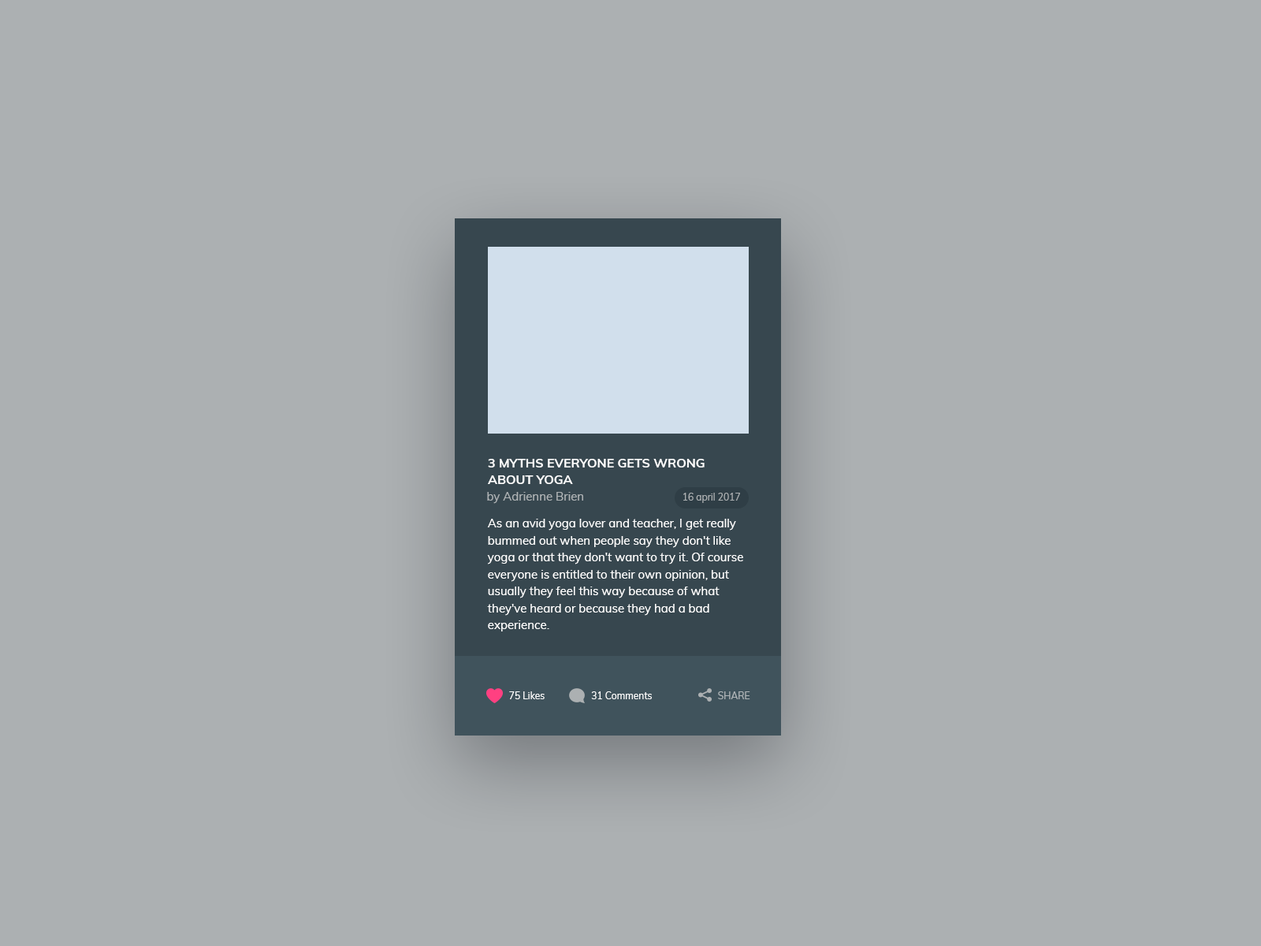
<style>
.page{position:relative;width:1261px;height:946px;background:#acb0b2}
.page>*{position:absolute;margin:0}
.t1{font:12.6px/16.9px "Muli-Bold";color:#ffffff;text-transform:uppercase}
.t2{font:11.8px "Muli-Regular";color:#aeb3b5}
.t3{font:9.5px "Muli-Regular";color:#acb0b2}
.t4{font:11.8px/16.9px "Muli-Regular";color:#ffffff}
.t5{font:9.5px "Muli-Regular";color:#ffffff}
.t6{font:9.5px "Muli-Regular";color:#b1b6b9}
</style>
<div class="page">
<p class="t1" style="left:488px;top:459px;width:217px;height:25px">3 Myths Everyone Gets Wrong About Yoga</p>
<p class="t2" style="left:487px;top:492px;width:96px;height:12px">by Adrienne Brien</p>
<p class="t3" style="left:683px;top:493px;width:57px;height:10px">16 april 2017</p>
<p class="t4" style="left:487px;top:519px;width:256px;height:112px">As an avid yoga lover and teacher, I get really bummed out when people say they don't like yoga or that they don't want to try it. Of course everyone is entitled to their own opinion, but usually they feel this way because of what they've heard or because they had a bad experience.</p>
<p class="t5" style="left:509px;top:691px;width:36px;height:8px">75 Likes</p>
<p class="t5" style="left:591px;top:691px;width:61px;height:8px">31 Comments</p>
<p class="t6" style="left:718px;top:691px;width:32px;height:8px">SHARE</p>
</div>
